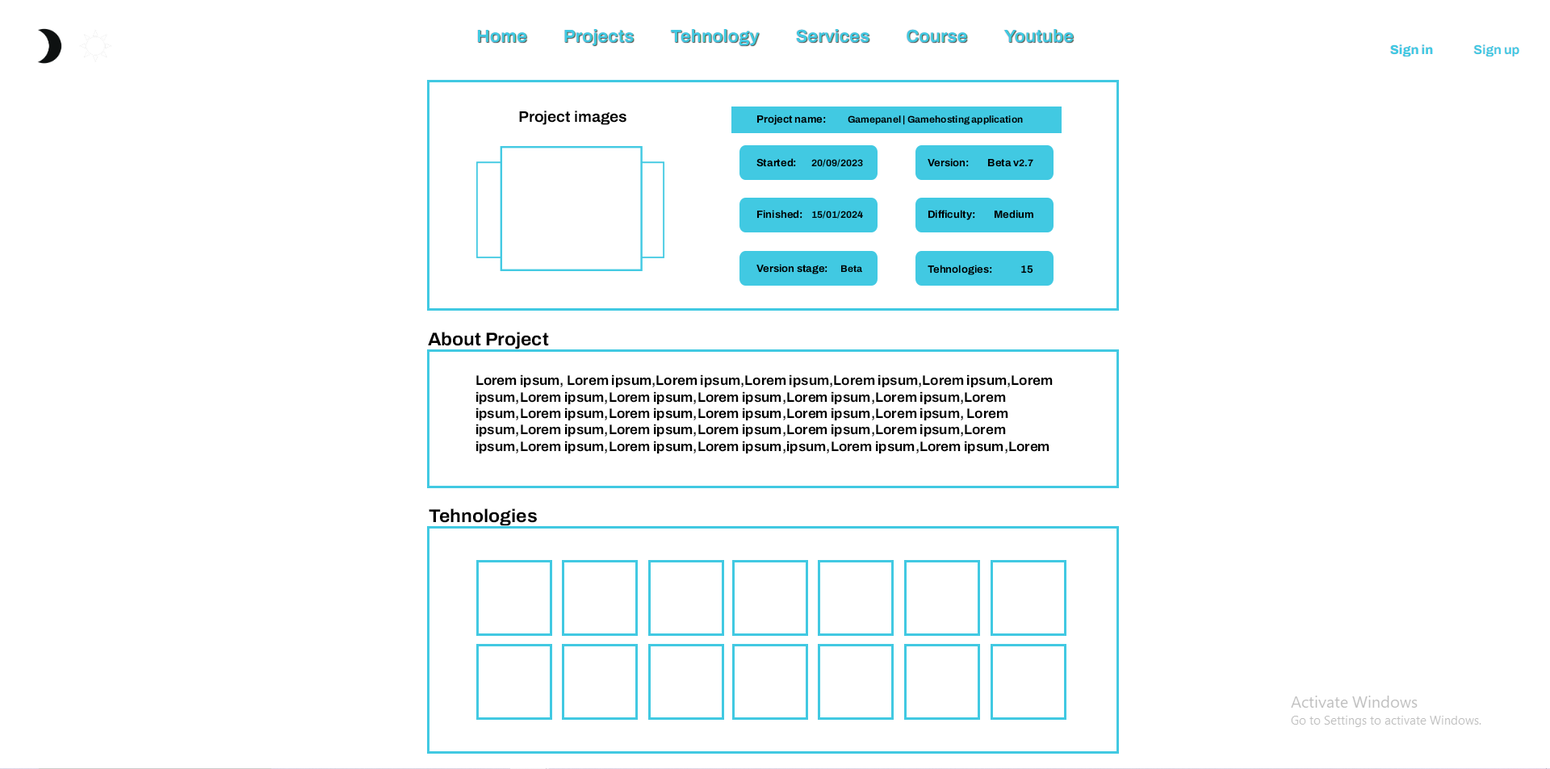
<style>
.page{position:relative;width:1550px;height:769px;background:#ffffff}
.page>*{position:absolute;margin:0}
.t1{font:15.3px "Archivo-Bold";color:#000000}
.t2{font:10.5px "Archivo-Bold";color:#000000}
.t3{font:9.7px "Archivo-Bold";color:#000000}
.t4{font:18.6px "Archivo-Bold";color:#000000}
.t5{font:13.7px "Archivo-Bold";color:#000000}
</style>
<div class="page">
<p class="t1" style="left:519px;top:111px;width:107px;height:14px">Project images</p>
<p class="t2" style="left:756px;top:115px;width:70px;height:10px">Project name:</p>
<p class="t3" style="left:848px;top:115px;width:175px;height:10px">Gamepanel | Gamehosting application</p>
<p class="t3" style="left:756px;top:158px;width:107px;height:9px"><span class="t2">Started:       </span>20/09/2023</p>
<p class="t2" style="left:928px;top:158px;width:105px;height:9px">Version:         Beta v<span class="t3">2.7</span></p>
<p class="t3" style="left:756px;top:210px;width:107px;height:9px"><span class="t2">Finished:    </span>15/01/2024</p>
<p class="t2" style="left:928px;top:210px;width:105px;height:10px">Difficulty:         Medium</p>
<p class="t2" style="left:756px;top:264px;width:106px;height:10px">Version stage:      <span class="t3">Beta</span></p>
<p class="t2" style="left:928px;top:265px;width:105px;height:10px">Tehnologies:             15</p>
<p class="t4" style="left:428px;top:332px;width:121px;height:18px">About Project</p>
<p class="t5" style="left:476px;top:375px;width:577px;height:79px">Lorem ipsum, Lorem ipsum,Lorem ipsum,Lorem ipsum,Lorem ipsum,Lorem ipsum,Lorem ipsum,Lorem ipsum,Lorem ipsum,Lorem ipsum,Lorem ipsum,Lorem ipsum,Lorem ipsum,Lorem ipsum,Lorem ipsum,Lorem ipsum,Lorem ipsum,Lorem ipsum, Lorem ipsum,Lorem ipsum,Lorem ipsum,Lorem ipsum,Lorem ipsum,Lorem ipsum,Lorem ipsum,Lorem ipsum,Lorem ipsum,Lorem ipsum,ipsum,Lorem ipsum,Lorem ipsum,Lorem ipsum,</p>
<p class="t4" style="left:429px;top:509px;width:108px;height:17px">Tehnologies</p>
</div>
